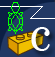
<style>
.page{position:relative;width:55px;height:57px;background:#223965}
.page>*{position:absolute;margin:0}
.t1{font:48px "Century";color:#ffffff}
</style>
<div class="page">
<p class="t1" style="left:31px;top:27px;width:19px;height:24px">c</p>
</div>
